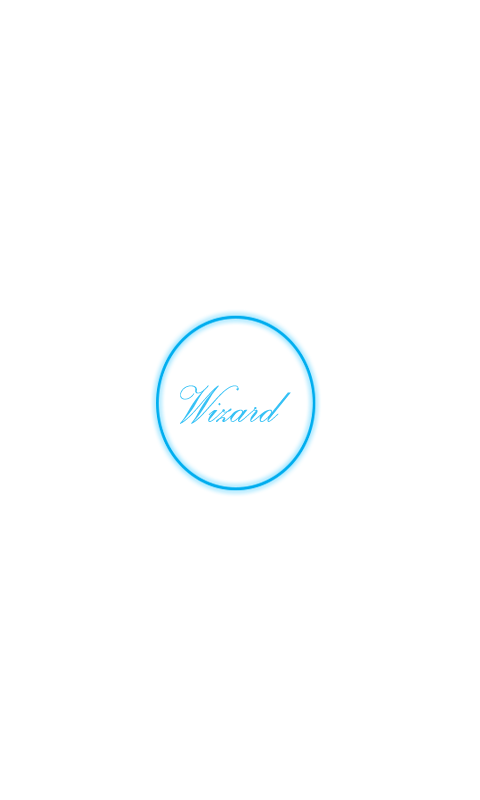
<style>
.page{position:relative;width:480px;height:800px;background:#ffffff}
.page>*{position:absolute;margin:0}
.t1{font:68px "PalaceScriptMT";color:#36c1f5;scale:0.93 1}
</style>
<div class="page">
<p class="t1" style="left:180px;top:385px;width:111px;height:39px">Wizard</p>
</div>
